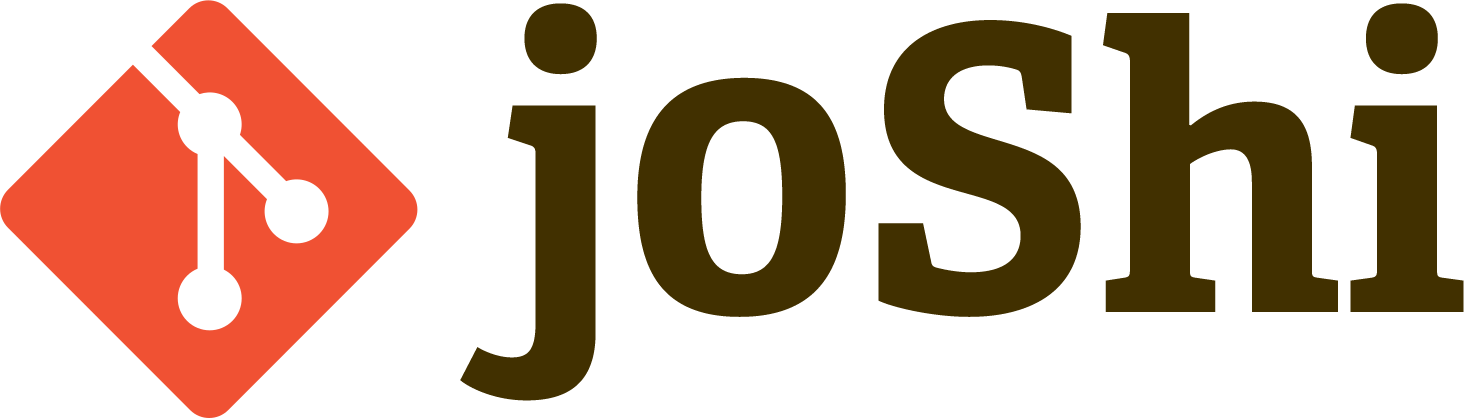
<style>
.page{position:relative;width:1464px;height:418px;background:#ffffff}
.page>*{position:absolute;margin:0}
.t1{font:396px "Adelle-Bold";color:#413000}
</style>
<div class="page">
<p class="t1" style="left:460px;top:3px;width:1004px;height:398px">j0Shi</p>
</div>
